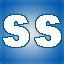
<style>
.page{position:relative;width:64px;height:64px;background:#ffffff}
.page>*{position:absolute;margin:0}
.t1{font:57.6px "Arial-Black";letter-spacing:0.05em;color:#ffffff;scale:0.83 1}
</style>
<div class="page">
<p class="t1" style="left:3px;top:15px;width:58px;height:32px">ss</p>
</div>
